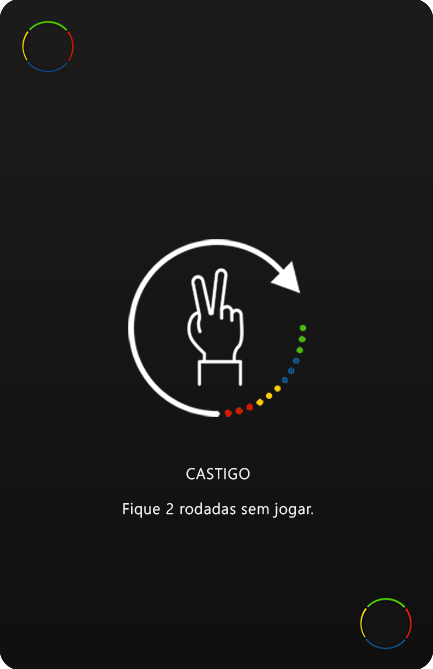
<style>
.page{position:relative;width:433px;height:669px}
.page>*{position:absolute;margin:0}
.t1{font:15.2px "NirmalaUI-Semilight";letter-spacing:0.05em;color:#ffffff}
</style>
<div class="page">
<p class="t1" style="left:186px;top:468px;width:64px;height:12px">CASTIGO</p>
<p class="t1" style="left:123px;top:502px;width:190px;height:16px">Fique 2 rodadas sem jogar.</p>
</div>
